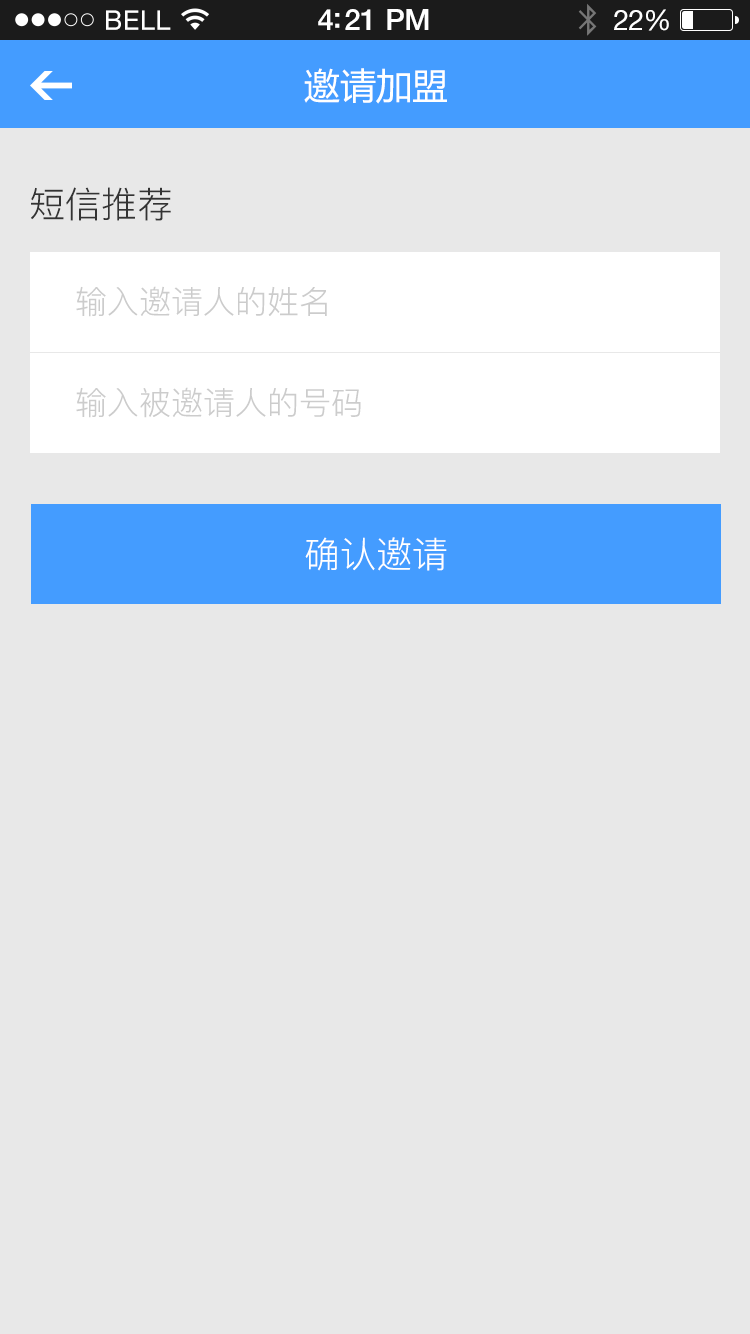
<style>
.page{position:relative;width:750px;height:1334px;background:#e8e8e8}
.page>*{position:absolute;margin:0}
.t1{font:36px "MicrosoftYaHei";color:#ffffff}
.t2{font:36px "PingFang-SC-Regular";color:#333333}
.t3{font:32px "PingFang-SC-Regular";color:#cccccc}
.t4{font:36px "PingFang-SC-Regular";color:#ffffff}
</style>
<div class="page">
<p class="t1" style="left:304px;top:68px;width:143px;height:36px">邀请加盟</p>
<p class="t2" style="left:31px;top:187px;width:140px;height:34px">短信推荐</p>
<p class="t3" style="left:76px;top:286px;width:251px;height:31px">输入邀请人的姓名</p>
<p class="t3" style="left:76px;top:387px;width:285px;height:31px">输入被邀请人的号码</p>
<p class="t4" style="left:305px;top:537px;width:142px;height:34px">确认邀请</p>
</div>
